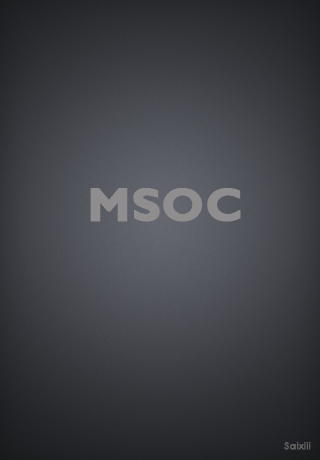
<style>
.page{position:relative;width:320px;height:460px}
.page>*{position:absolute;margin:0}
.t1{font:48px "GillSansMT-Bold";color:#8f8d8d;font-weight:bold}
.t2{font:10px "CenturyGothic";color:#615f5f;font-weight:bold}
</style>
<div class="page">
<p class="t1" style="left:90px;top:188px;width:151px;height:34px">MSOC</p>
<p class="t2" style="left:284px;top:442px;width:27px;height:8px">Saixiii</p>
</div>
